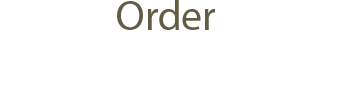
<style>
.page{position:relative;width:350px;height:100px;background:#ffffff}
.page>*{position:absolute;margin:0}
.t1{font:41.7px "MyriadPro-Regular";color:#615c43}
</style>
<div class="page">
<p class="t1" style="left:117px;top:0px;width:98px;height:30px">Order</p>
</div>
